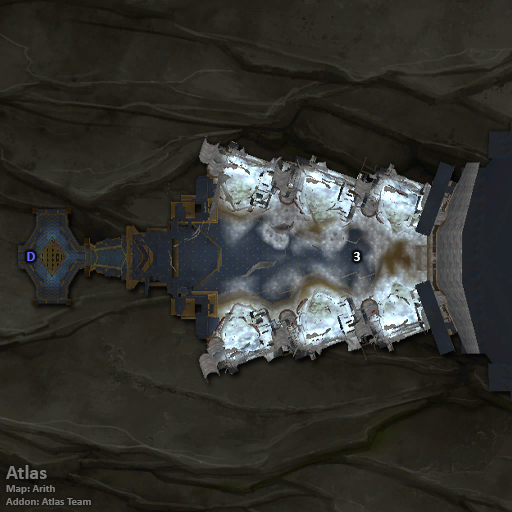
<style>
.page{position:relative;width:512px;height:512px}
.page>*{position:absolute;margin:0}
.t1{font:14px "Calibri-Bold";color:#6666ff}
.t2{font:14px "Calibri-Bold";color:#ffffff}
.t3{font:11px "Calibri-Bold";color:#7d7c7a}
.t4{font:20px "Calibri-Bold";color:#7d7c7a}
</style>
<div class="page">
<p class="t1" style="left:27px;top:252px;width:8px;height:9px">D</p>
<p class="t2" style="left:354px;top:252px;width:6px;height:9px">3</p>
<p class="t3" style="left:6px;top:465px;width:85px;height:40px"><span class="t4">Atlas<br></span>Map: Arith<br>Addon: Atlas Team</p>
</div>
